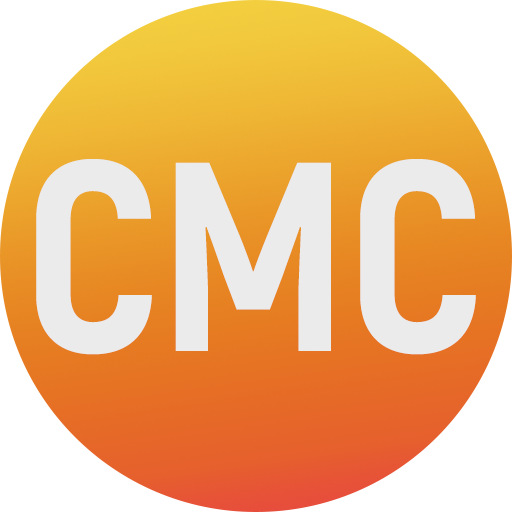
<style>
.page{position:relative;width:512px;height:512px;background:#ffffff}
.page>*{position:absolute;margin:0}
.t1{font:269px "Akrobat-ExtraBold";color:#ebebeb}
</style>
<div class="page">
<p class="t1" style="left:36px;top:159px;width:440px;height:196px">CMC</p>
</div>
